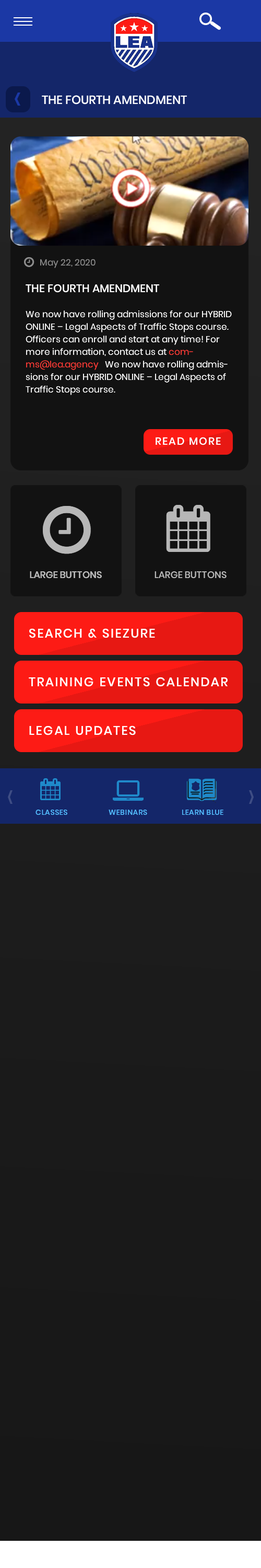
<style>
.page{position:relative;width:261px;height:1568px}
.page>*{position:absolute;margin:0}
.t1{font:12px "Poppins-Medium";color:#ffffff}
.t2{font:8.9px "Poppins-Regular";color:#8d8d8d}
.t3{font:8.9px/12.5px "Poppins-Regular";color:#ffffff}
.t4{font:11px/12.5px "Poppins-Medium";color:#ffffff}
.t5{font:8.9px/12.5px "Poppins-Regular";color:#fe3a35}
.t6{font:10.5px "Poppins-Medium";letter-spacing:0.1em;color:#ffffff;text-transform:uppercase}
.t7{font:9.4px "Poppins-Medium";color:#b7b7b7;text-transform:uppercase}
.t8{font:12.5px "Poppins-Medium";letter-spacing:0.1em;color:#ffffff;text-transform:uppercase}
.t9{font:7.3px "Poppins-Medium";letter-spacing:0.04em;color:#53bdff;text-transform:uppercase}
</style>
<div class="page">
<p class="t1" style="left:42px;top:95px;width:145px;height:10px">THE FOURTH AMENDMENT</p>
<p class="t2" style="left:40px;top:259px;width:56px;height:9px">May 22, 2020</p>
<p class="t3" style="left:26px;top:284px;width:206px;height:111px"><span class="t4">THE FOURTH AMENDMENT</span><br><br>We now have rolling admissions for our HYBRID ONLINE – Legal Aspects of Traffic Stops course.  Officers can enroll and start at any time! For more information, contact us at <span class="t5">comms@lea.agency</span>   We now have rolling admissions for our HYBRID ONLINE – Legal Aspects of Traffic Stops course.</p>
<p class="t6" style="left:156px;top:437px;width:65px;height:8px">read more</p>
<p class="t7" style="left:30px;top:571px;width:72px;height:8px">large buttons</p>
<p class="t7" style="left:30px;top:571px;width:72px;height:8px">large buttons</p>
<p class="t7" style="left:155px;top:571px;width:72px;height:8px">large buttons</p>
<p class="t8" style="left:29px;top:628px;width:126px;height:10px">search &amp; siezure</p>
<p class="t8" style="left:29px;top:677px;width:199px;height:10px">training events calendar</p>
<p class="t8" style="left:29px;top:725px;width:107px;height:10px">legal updates</p>
<p class="t9" style="left:36px;top:810px;width:31px;height:5px">classes</p>
<p class="t9" style="left:109px;top:810px;width:38px;height:5px">webinars</p>
<p class="t9" style="left:182px;top:810px;width:42px;height:5px">learn blue</p>
</div>
